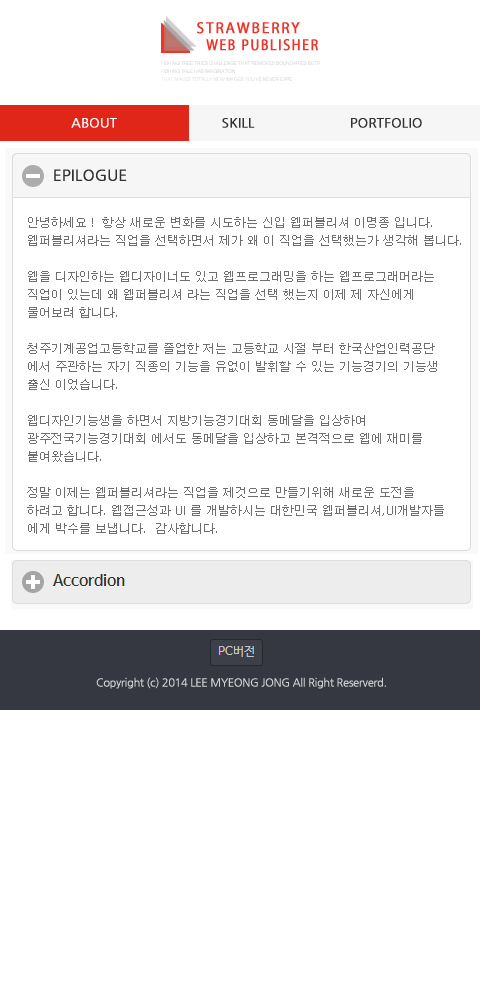
<style>
.page{position:relative;width:480px;height:1000px;background:#ffffff}
.page>*{position:absolute;margin:0}
.t1{font:16px "MyriadPro-Regular";letter-spacing:0.1em;color:#f03426;font-weight:bold;scale:0.95 1}
.t2{font:16px "MyriadPro-Regular";letter-spacing:0.1em;color:#f03426;font-weight:bold;scale:0.85 1}
.t3{font:13px "NanumGothic";color:#ffffff;font-weight:bold}
.t4{font:13px "NanumGothic";color:#333333;font-weight:bold}
.t5{font:15px "NanumGothic";color:#333333;font-weight:bold}
.t6{font:12px/18px "Dotum";color:#6e6e6e}
.t7{font:11px "NanumGothic";letter-spacing:-0.05em;color:#d2d2d2;font-weight:bold}
</style>
<div class="page">
<p class="t1" style="left:197px;top:22px;width:103px;height:12px">STRAWBERRY</p>
<p class="t2" style="left:206px;top:39px;width:112px;height:12px">WEB PUBLISHER</p>
<p class="t3" style="left:71px;top:118px;width:46px;height:10px">ABOUT</p>
<p class="t4" style="left:222px;top:118px;width:33px;height:10px">SKILL</p>
<p class="t4" style="left:351px;top:118px;width:71px;height:10px">PORTFOLIO</p>
<p class="t5" style="left:54px;top:169px;width:73px;height:12px">EPILOGUE</p>
<p class="t6" style="left:27px;top:217px;width:434px;height:317px">안녕하세요 !  항상 새로운 변화를 시도하는 신입 웹퍼블리셔 이명종 입니다. <br>웹퍼블리셔라는 직업을 선택하면서 제가 왜 이 직업을 선택했는가 생각해 봅니다. <br><br>웹을 디자인하는 웹디자이너도 있고 웹프로그래밍을 하는 웹프로그래머라는<br>직업이 있는데 왜 웹퍼블리셔 라는 직업을 선택 했는지 이제 제 자신에게 <br>물어보려 합니다.<br><br>청주기계공업고등학교를 졸업한 저는 고등학교 시절 부터 한국산업인력공단<br>에서 주관하는 자기 직종의 기능을 유없이 발휘할 수 있는 기능경기의 기능생 <br>출신 이었습니다. <br><br>웹디자인기능생을 하면서 지방기능경기대회 동메달을 입상하여  <br>광주전국기능경기대회 에서도 동메달을 입상하고 본격적으로 웹에 재미를 <br>붙여왔습니다. <br><br>정말 이제는 웹퍼블리셔라는 직업을 제것으로 만들기위해 새로운 도전을 <br>하려고 합니다. 웹접근성과 UI 를 개발하시는 대한민국 웹퍼블리셔,UI개발자들<br>에게 박수를 보냅니다.  감사합니다.</p>
<p class="t7" style="left:96px;top:677px;width:290px;height:12px">Copyright (c) 2014 LEE MYEONG JONG All Right Reserverd.</p>
</div>
